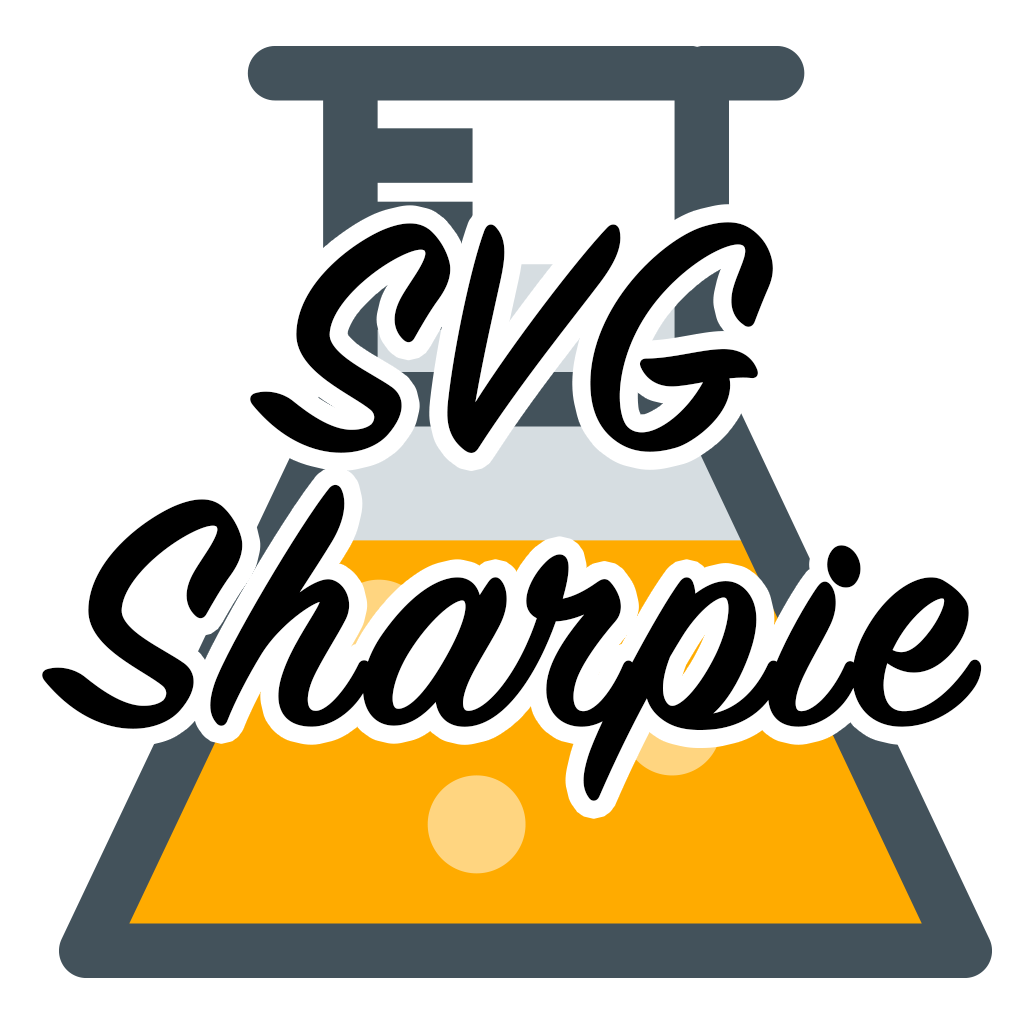
<style>
.page{position:relative;width:1024px;height:1024px;background:#ffffff}
.page>*{position:absolute;margin:0}
.t1{font:350.3px/275.3px "SignPainter-HouseScript";color:#000000;font-weight:bold}
</style>
<div class="page">
<p class="t1" style="left:42px;top:222px;width:940px;height:579px;text-align:center">SVG<br>Sharpie</p>
</div>
